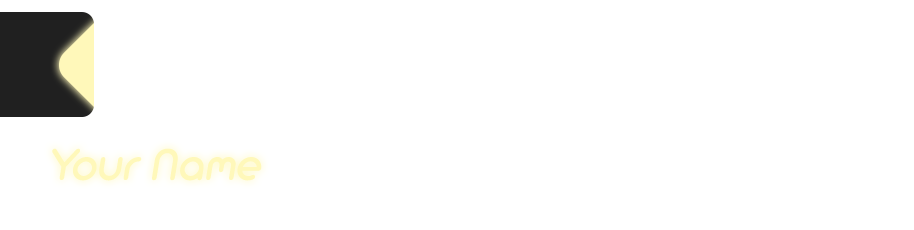
<style>
.page{position:relative;width:914px;height:230px;background:#ffffff}
.page>*{position:absolute;margin:0}
.t1{font:49.1px "AristaProAlternate";color:#fff8ba}
</style>
<div class="page">
<p class="t1" style="left:52px;top:148px;width:210px;height:33px">Your Name</p>
</div>
